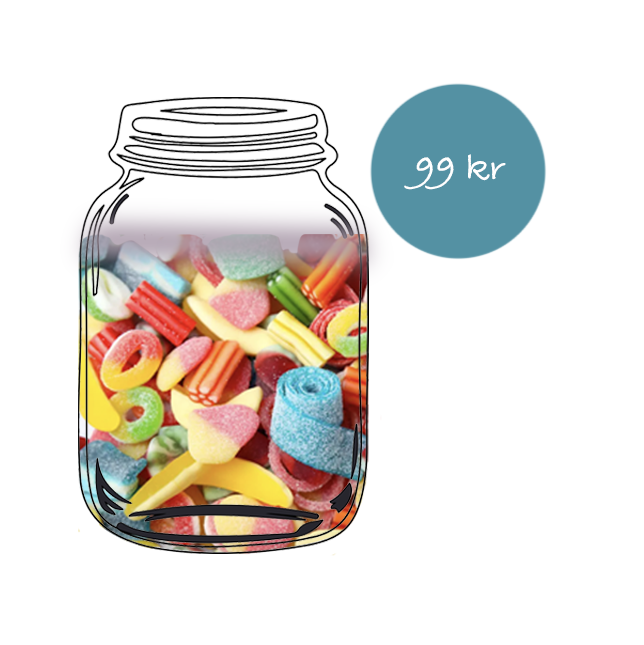
<style>
.page{position:relative;width:644px;height:645px;background:#ffffff}
.page>*{position:absolute;margin:0}
.t1{font:38px "BradleyHandITCTT-Bold";color:#ffffff}
</style>
<div class="page">
<p class="t1" style="left:404px;top:154px;width:102px;height:36px">99 kr</p>
</div>
